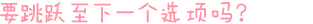
<style>
.page{position:relative;width:313px;height:24px;background:#ffffff}
.page>*{position:absolute;margin:0}
.t1{font:26px "¢è?";color:#ff93a5}
</style>
<div class="page">
<p class="t1" style="left:0px;top:1px;width:247px;height:23px">要跳跃至下一个选项吗？</p>
</div>
